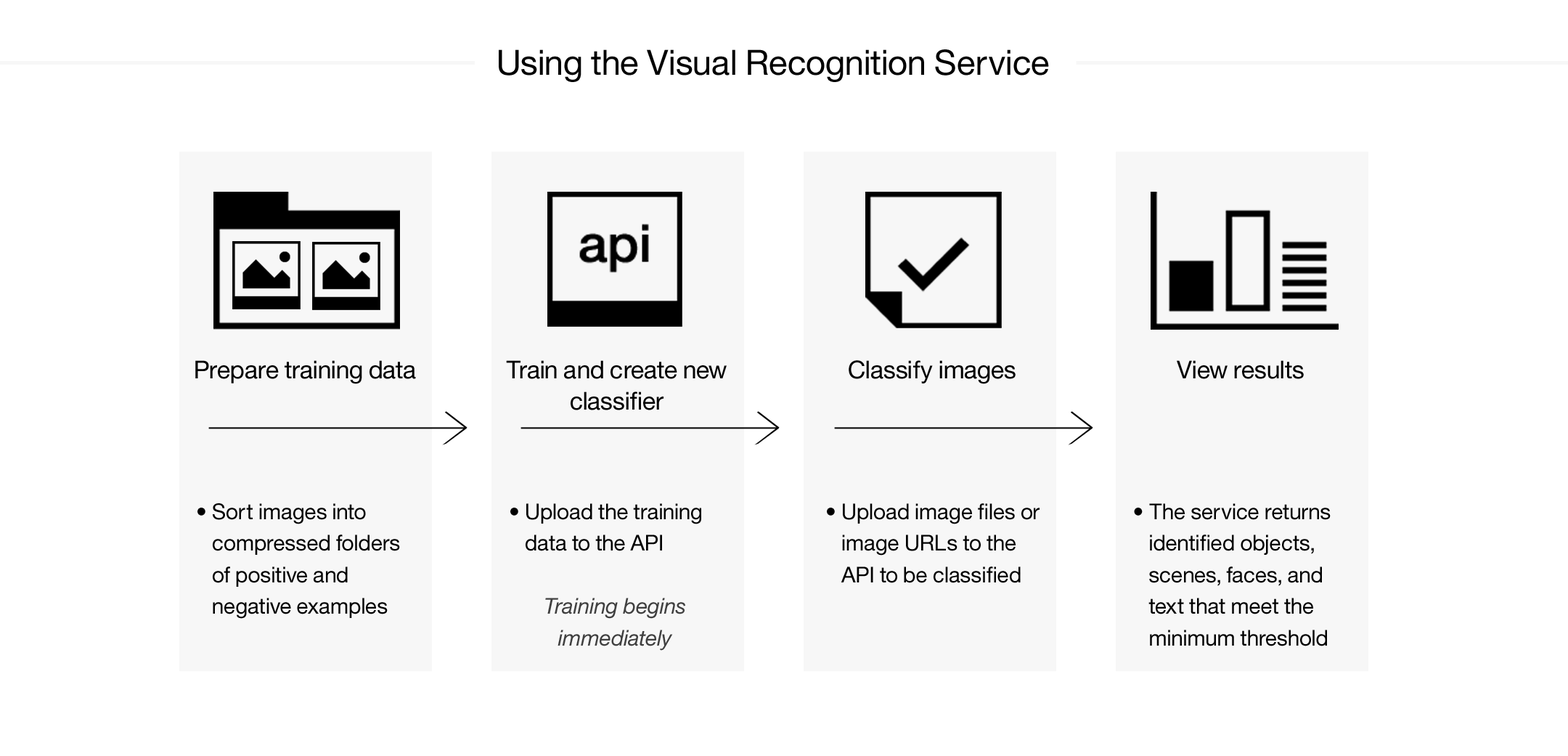
<style>
.page{position:relative;width:1568px;height:756px;background:#ffffff}
.page>*{position:absolute;margin:0}
.t1{font:34.8px "HelvNeueforIBM";color:#000000}
.t2{font:24.7px "HelvNeueforIBM";color:#000000}
.t3{font:24.7px/31.6px "HelvNeueforIBM";color:#000000}
.t4{font:21.8px/31.6px "HelvNeueforIBM";color:#000000}
.t5{font:21.8px/31.6px "HelvNeueforIBM-Italic";color:#3f3f3f}
</style>
<div class="page">
<p class="t1" style="left:499px;top:49px;width:550px;height:33px">Using the Visual Recognition Service</p>
<p class="t2" style="left:195px;top:360px;width:221px;height:24px">Prepare training data</p>
<p class="t3" style="left:506px;top:360px;width:221px;height:50px;text-align:center">Train and create new classifier</p>
<p class="t2" style="left:849px;top:360px;width:167px;height:24px">Classify images</p>
<p class="t2" style="left:1177px;top:360px;width:127px;height:19px">View results</p>
<p class="t4" style="left:197px;top:503px;width:203px;height:115px">• Sort images into compressed folders of positive and negative examples</p>
<p class="t4" style="left:510px;top:503px;width:191px;height:147px">• Upload the training data to the API<br><br><span class="t5">Training begins <br>immediately</span></p>
<p class="t4" style="left:827px;top:503px;width:213px;height:80px">• Upload image files or image URLs to the API to be classified</p>
<p class="t4" style="left:1134px;top:503px;width:197px;height:143px">• The service returns identified objects, scenes, faces, and text that meet the minimum threshold</p>
</div>
